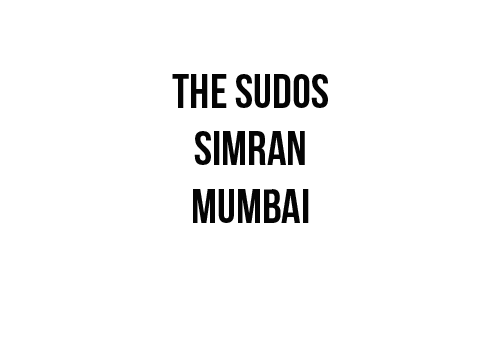
<style>
.page{position:relative;width:504px;height:360px;background:#ffffff}
.page>*{position:absolute;margin:0}
.t1{font:48px "BebasNeueBold";color:#040404}
</style>
<div class="page">
<p class="t1" style="left:172px;top:74px;width:156px;height:149px;text-align:center">THe sudos<br>simran<br>mumbai</p>
</div>
